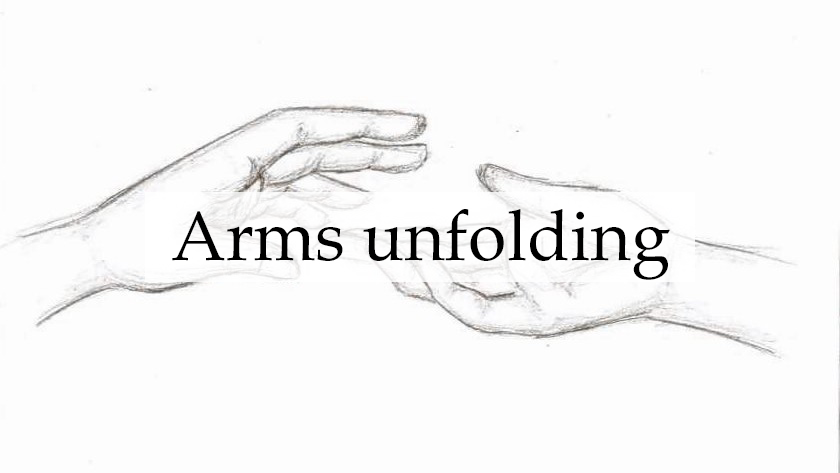
<style>
.page{position:relative;width:840px;height:473px;background:#fdfdfd}
.page>*{position:absolute;margin:0}
.t1{font:70px "BookAntiqua";color:#000000}
</style>
<div class="page">
<p class="t1" style="left:172px;top:209px;width:498px;height:71px">Arms unfolding</p>
</div>
